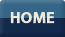
<style>
.page{position:relative;width:65px;height:37px;background:#132a4d}
.page>*{position:absolute;margin:0}
.t1{font:16px "MyriadPro-Semibold";color:#eceadb;text-transform:uppercase;font-weight:bold}
</style>
<div class="page">
<p class="t1" style="left:10px;top:12px;width:45px;height:12px">HOME</p>
</div>
